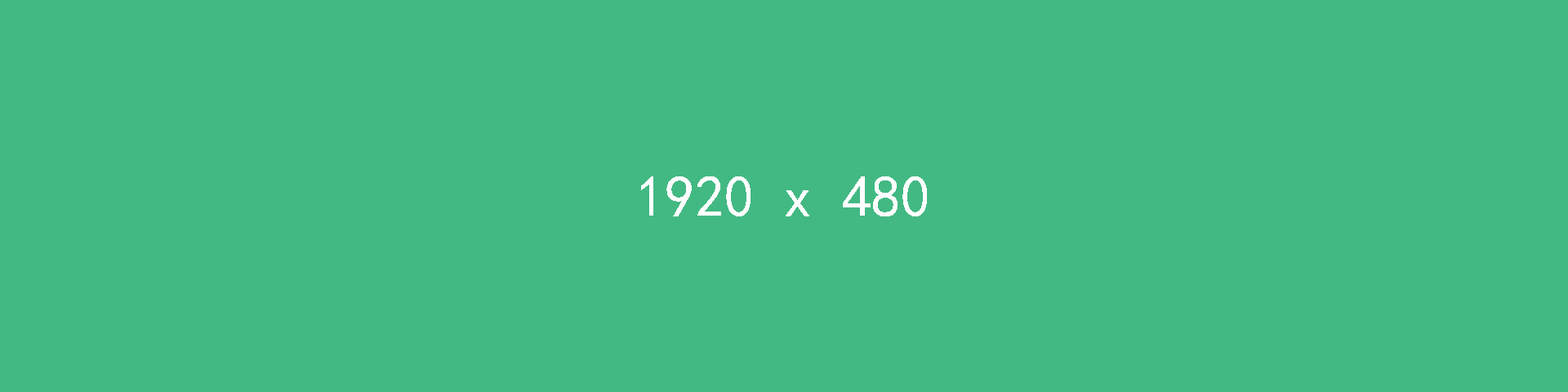
<style>
.page{position:relative;width:1568px;height:392px;background:#42b983}
.page>*{position:absolute;margin:0}
.t1{font:58.8px "SimHei";color:#ffffff}
</style>
<div class="page">
<p class="t1" style="left:641px;top:176px;width:286px;height:40px">1920 x 480</p>
</div>
